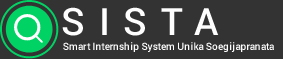
<style>
.page{position:relative;width:283px;height:59px;background:#333333}
.page>*{position:absolute;margin:0}
.t1{font:37.8px "Roboto-Medium";letter-spacing:0.36em;color:#fefefe}
.t2{font:10px "Roboto-Medium";letter-spacing:0.01em;color:#fefefe}
</style>
<div class="page">
<p class="t1" style="left:62px;top:7px;width:157px;height:29px">SISTA</p>
<p class="t2" style="left:63px;top:42px;width:211px;height:10px">Smart Internship System Unika Soegijapranata</p>
</div>
